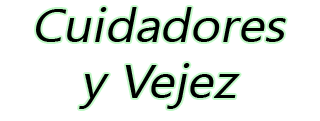
<style>
.page{position:relative;width:320px;height:121px;background:#ffffff}
.page>*{position:absolute;margin:0}
.t1{font:46.7px "SegoeUI";color:#000000;font-style:italic;scale:1.09 1}
</style>
<div class="page">
<p class="t1" style="left:36px;top:7px;width:250px;height:102px;text-align:center">Cuidadores<br>y Vejez</p>
</div>
